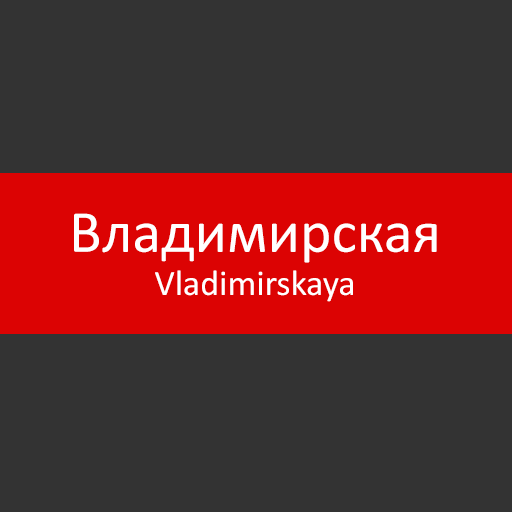
<style>
.page{position:relative;width:512px;height:512px;background:#333333}
.page>*{position:absolute;margin:0}
.t1{font:36px "Calibri";color:#ffffff}
.t2{font:60px "Calibri";color:#ffffff}
</style>
<div class="page">
<p class="t1" style="left:74px;top:213px;width:363px;height:89px;text-align:center"><span class="t2">Владимирская<br></span>Vladimirskaya</p>
</div>
